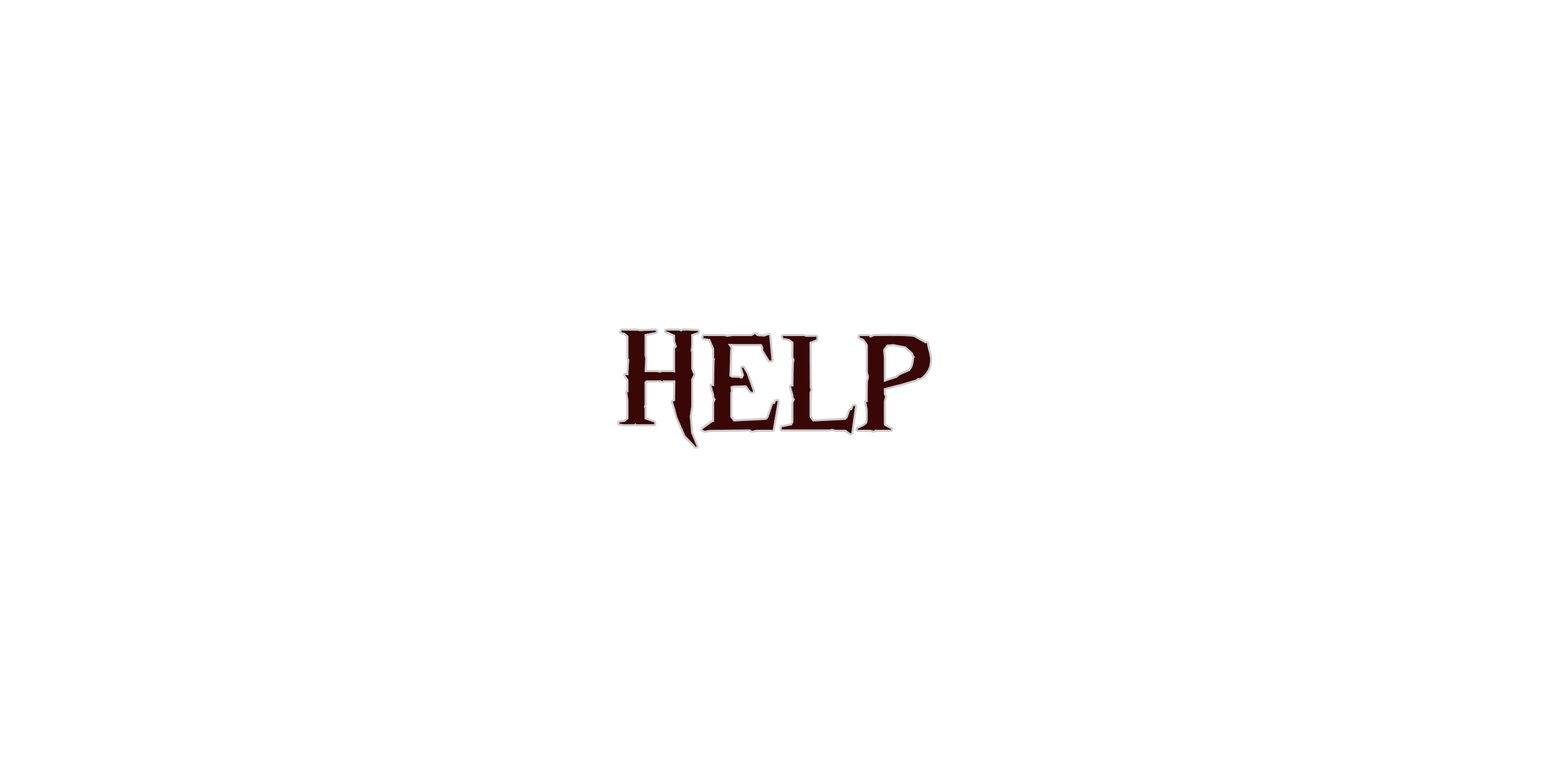
<style>
.page{position:relative;width:1544px;height:772px;background:#ffffff}
.page>*{position:absolute;margin:0}
.t1{font:145.6px "KONSTANTINERegular";color:#3a0707}
</style>
<div class="page">
<p class="t1" style="left:619px;top:330px;width:312px;height:117px">Help</p>
</div>
